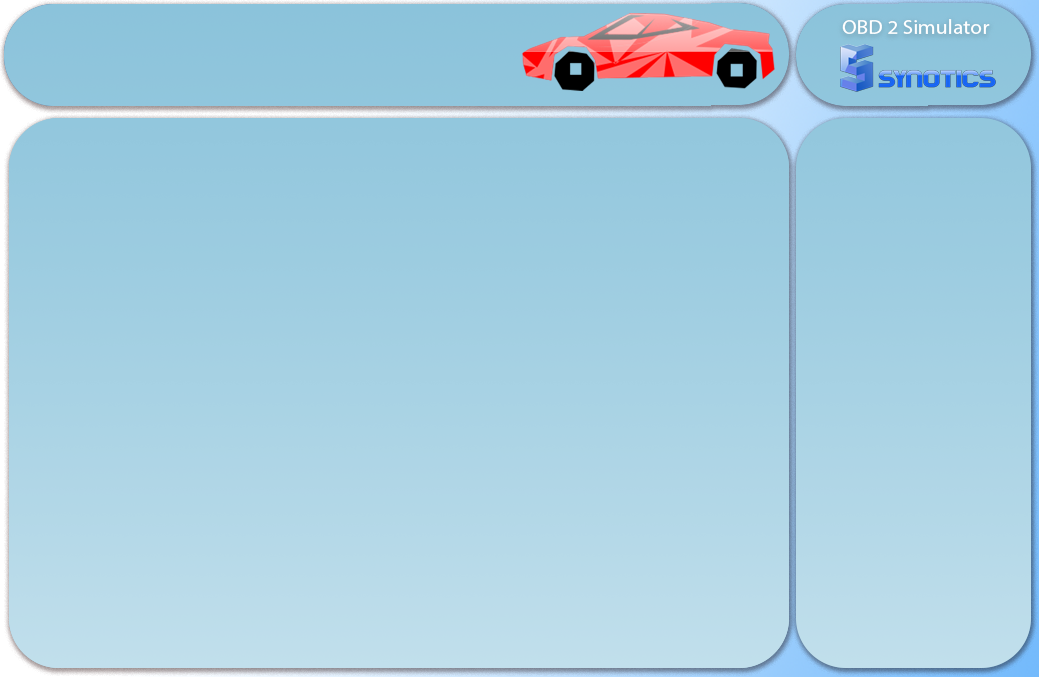
<style>
.page{position:relative;width:1039px;height:677px}
.page>*{position:absolute;margin:0}
.t1{font:20px "MyriadPro-Regular";color:#ffffff;scale:1.07 1}
</style>
<div class="page">
<p class="t1" style="left:842px;top:19px;width:148px;height:15px">OBD 2 Simulator</p>
</div>
